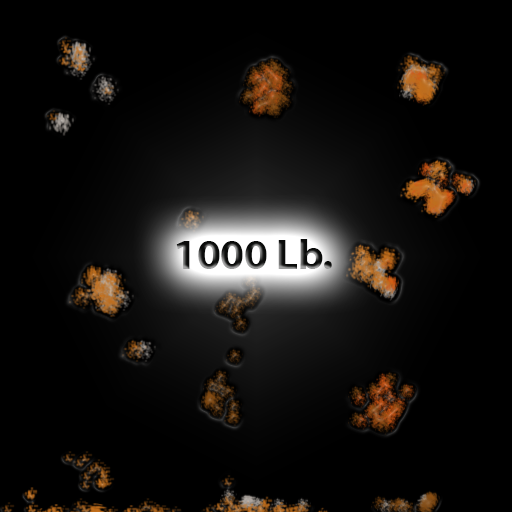
<style>
.page{position:relative;width:512px;height:512px;background:#000000}
.page>*{position:absolute;margin:0}
.t1{font:41.7px "MyriadWebPro-Bold"}
</style>
<div class="page">
<p class="t1" style="left:176px;top:239px;width:156px;height:30px">1000 Lb.</p>
</div>
